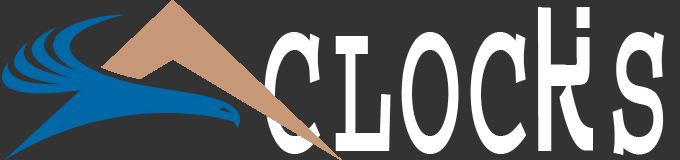
<style>
.page{position:relative;width:680px;height:160px;background:#333333}
.page>*{position:absolute;margin:0}
.t1{font:173.3px "VNI-Couri-Bold";letter-spacing:0.05em;color:#ffffff;scale:0.51 1}
.t2{font:173.3px "VNI-Nhatban";letter-spacing:0.05em;color:#ffffff;scale:0.51 1}
</style>
<div class="page">
<p class="t1" style="left:264px;top:7px;width:400px;height:148px">CLOC<span class="t2">K</span>S</p>
</div>
